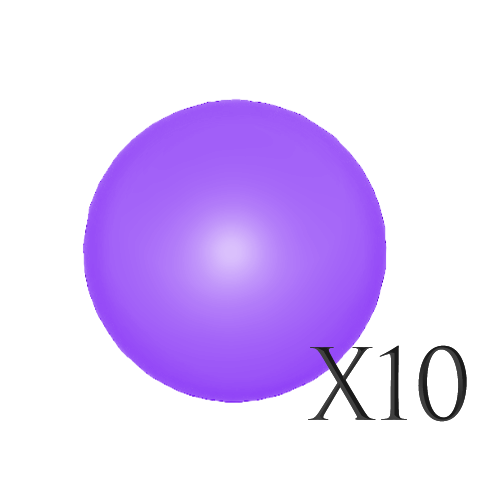
<style>
.page{position:relative;width:482px;height:482px;background:#ffffff}
.page>*{position:absolute;margin:0}
.t1{font:96px "TrajanColor-Concept";color:#2d2d2d}
</style>
<div class="page">
<p class="t1" style="left:308px;top:345px;width:159px;height:77px">X10</p>
</div>
